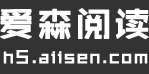
<style>
.page{position:relative;width:149px;height:74px;background:#333333}
.page>*{position:absolute;margin:0}
.t1{font:36px "ZHSCNMT--GBK1-0";letter-spacing:0.05em;color:#ffffff;font-weight:bold}
.t2{font:18px "ZHSCNMT--GBK1-0";letter-spacing:0.05em;color:#ffffff;font-weight:bold}
</style>
<div class="page">
<p class="t1" style="left:0px;top:8px;width:149px;height:32px">爱森阅读</p>
<p class="t2" style="left:3px;top:50px;width:145px;height:14px">h5.aiisen.com</p>
</div>
